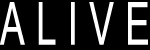
<style>
.page{position:relative;width:150px;height:50px;background:#000000}
.page>*{position:absolute;margin:0}
.t1{font:66.5px "Vrinda";letter-spacing:0.27em;color:#ffffff;text-transform:uppercase;scale:0.62 1}
</style>
<div class="page">
<p class="t1" style="left:0px;top:2px;width:148px;height:43px">ALIVE</p>
</div>
